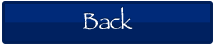
<style>
.page{position:relative;width:215px;height:45px;background:#002160}
.page>*{position:absolute;margin:0}
.t1{font:36px "ParchmentMF";color:#ffffff}
</style>
<div class="page">
<p class="t1" style="left:83px;top:7px;width:50px;height:23px">Back</p>
</div>
